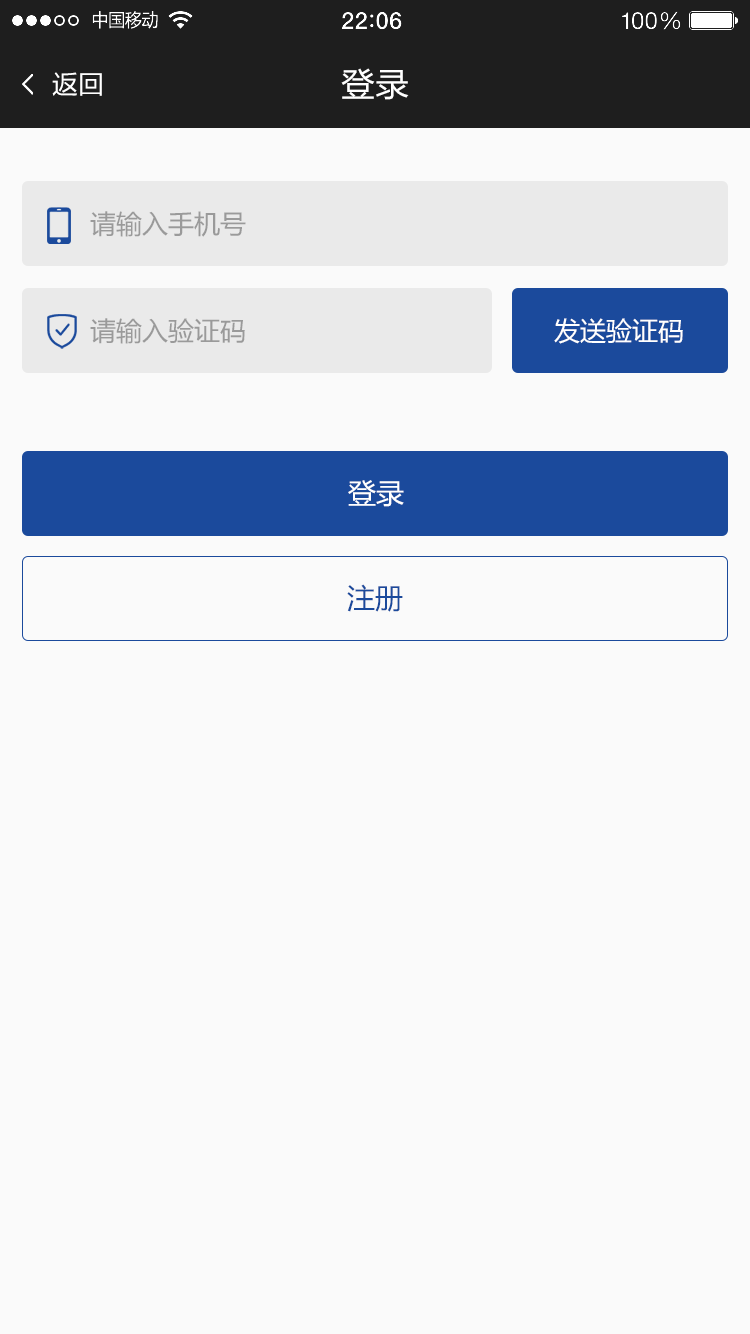
<style>
.page{position:relative;width:750px;height:1334px;background:#fafafa}
.page>*{position:absolute;margin:0}
.t1{font:26px "FZLTHJW--GB1-0";color:#ffffff}
.t2{font:34px "FZLTHJW--GB1-0";color:#ffffff}
.t3{font:26px "MicrosoftYaHei";color:#9a9a9a}
.t4{font:26px "MicrosoftYaHei";color:#ffffff}
.t5{font:28px "MicrosoftYaHei";color:#ffffff}
.t6{font:28px "MicrosoftYaHei";color:#1b4a9c}
</style>
<div class="page">
<p class="t1" style="left:52px;top:72px;width:50px;height:24px">返回</p>
<p class="t2" style="left:341px;top:68px;width:68px;height:32px">登录</p>
<p class="t3" style="left:90px;top:211px;width:156px;height:26px">请输入手机号</p>
<p class="t3" style="left:90px;top:318px;width:155px;height:26px">请输入验证码</p>
<p class="t4" style="left:554px;top:318px;width:129px;height:26px">发送验证码</p>
<p class="t5" style="left:348px;top:480px;width:56px;height:27px">登录</p>
<p class="t6" style="left:347px;top:584px;width:56px;height:28px">注册</p>
</div>
